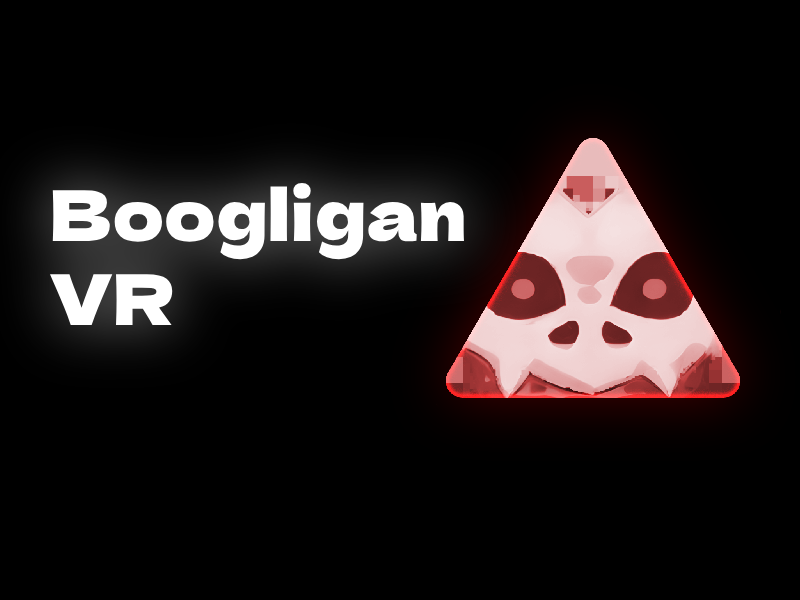
<style>
.page{position:relative;width:800px;height:600px;background:#000000}
.page>*{position:absolute;margin:0}
.t1{font:70px "DelaGothicOne-Regular";color:#ffffff}
</style>
<div class="page">
<p class="t1" style="left:50px;top:182px;width:414px;height:143px">Boogligan<br>VR</p>
</div>
